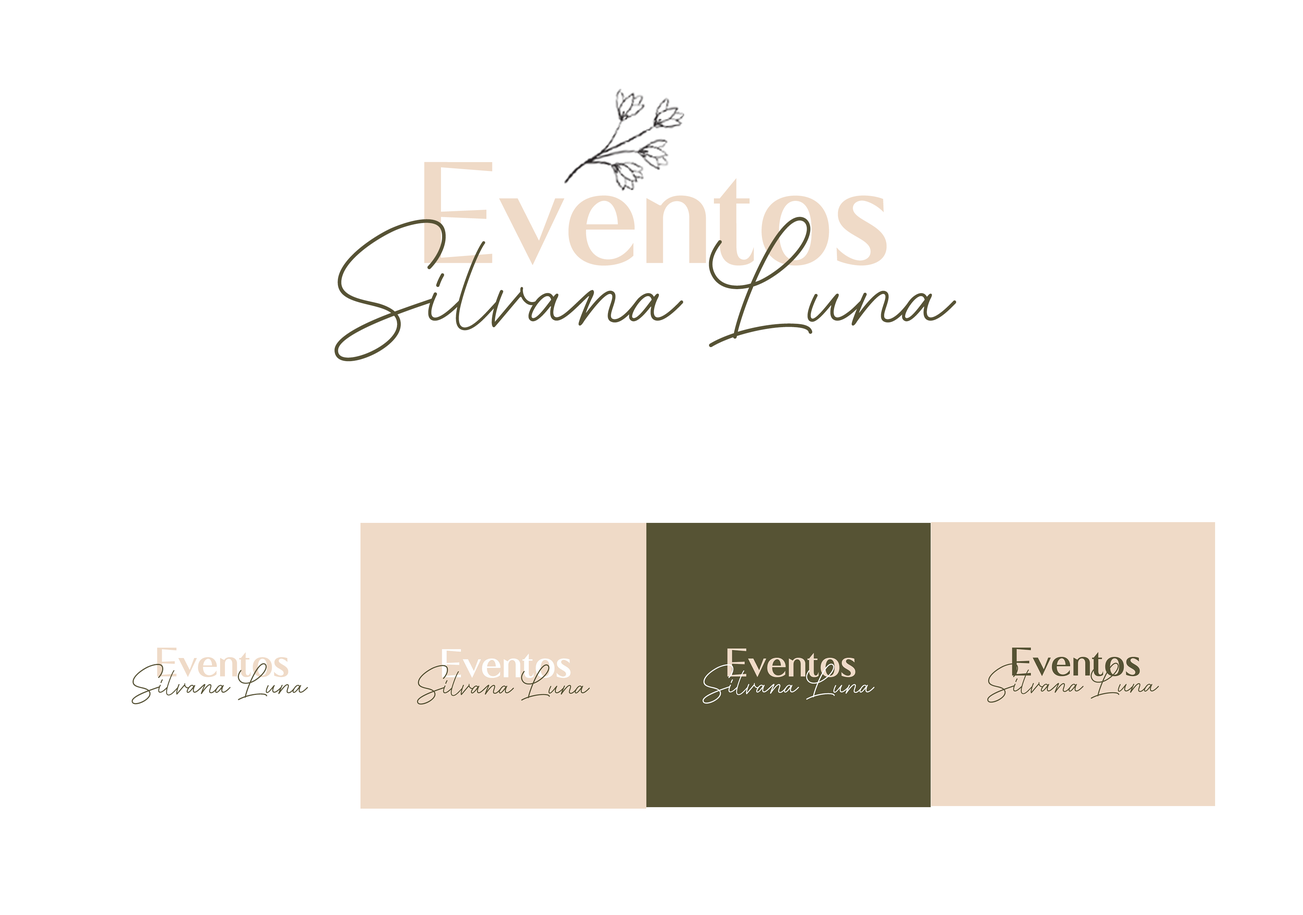
<style>
.page{position:relative;width:1303px;height:915px;background:#ffffff}
.page>*{position:absolute;margin:0}
.t1{font:91px "KalistaSerif-Regular";color:#efdac7}
.t2{font:137.2px "KalistaScript-Regular";color:#565234}
.t3{font:25.8px "KalistaSerif-Regular";color:#efdac7}
.t4{font:38.9px "KalistaScript-Regular";color:#565234}
</style>
<div class="page">
<p class="t1" style="left:424px;top:162px;width:463px;height:104px">Eventos</p>
<p class="t2" style="left:334px;top:217px;width:622px;height:145px">Silvana Luna</p>
<p class="t3" style="left:157px;top:648px;width:131px;height:29px">Eventos</p>
<p class="t4" style="left:131px;top:663px;width:177px;height:42px">Silvana Luna</p>
</div>
